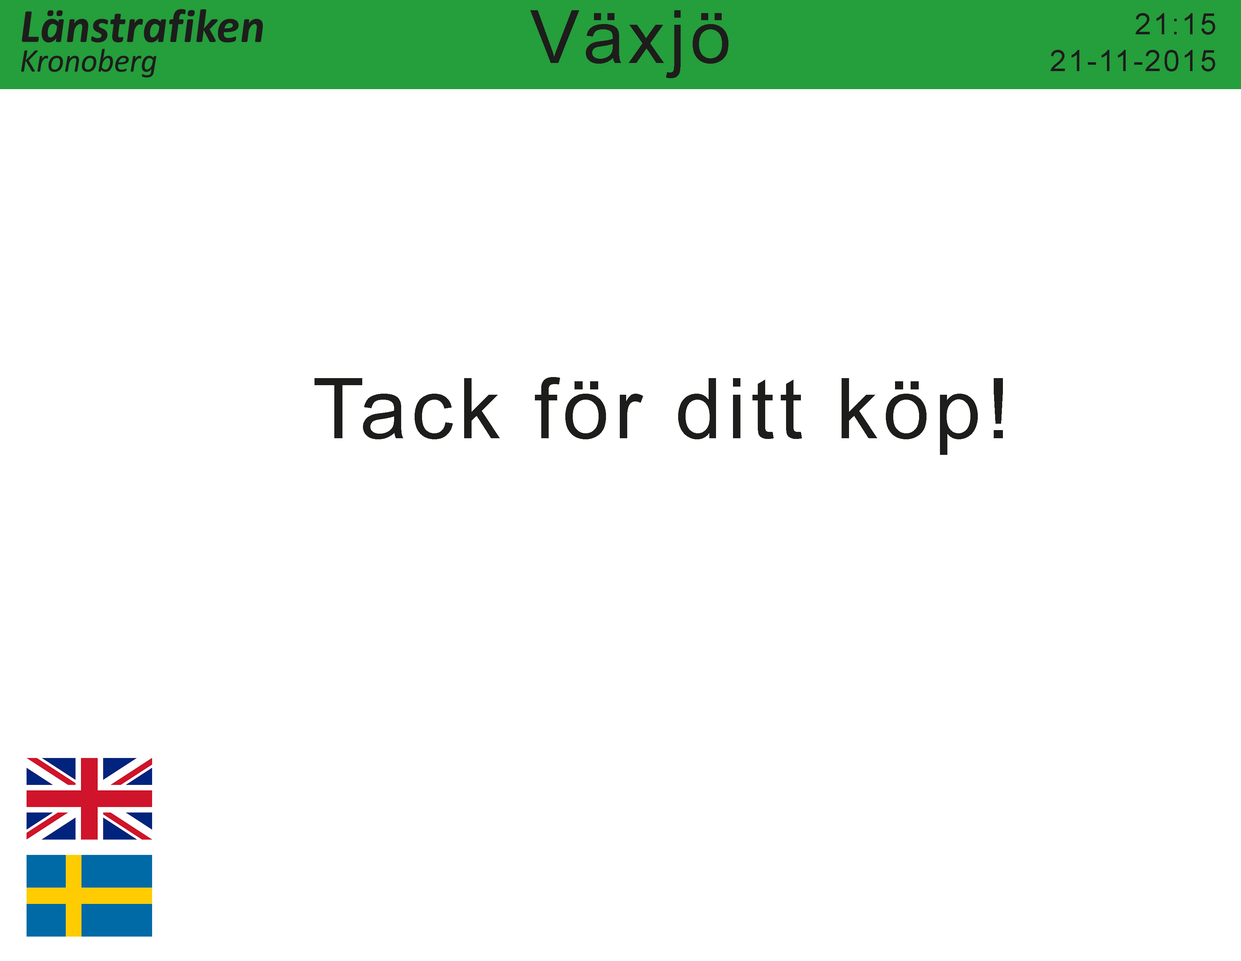
<style>
.page{position:relative;width:1241px;height:961px;background:#ffffff}
.page>*{position:absolute;margin:0}
.t1{font:73.4px "ArialMT";letter-spacing:0.06em;color:#1d1d1b}
.t2{font:29.8px "ArialMT";letter-spacing:0.06em;color:#1d1d1b}
.t3{font:84px "ArialMT";letter-spacing:0.06em;color:#1d1d1b}
</style>
<div class="page">
<p class="t1" style="left:530px;top:10px;width:198px;height:68px">Växjö</p>
<p class="t2" style="left:1135px;top:13px;width:80px;height:22px">21:15</p>
<p class="t2" style="left:1051px;top:50px;width:164px;height:21px">21-11-2015</p>
<p class="t3" style="left:314px;top:377px;width:689px;height:78px">Tack för ditt köp!</p>
</div>
